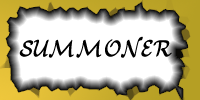
<style>
.page{position:relative;width:200px;height:100px;background:#ffffff}
.page>*{position:absolute;margin:0}
.t1{font:24px "EuclidMathOne-Bold";letter-spacing:0.04em;color:#000000;scale:0.8 1}
</style>
<div class="page">
<p class="t1" style="left:19px;top:36px;width:153px;height:22px">SUMMONER</p>
</div>
